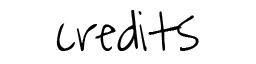
<style>
.page{position:relative;width:256px;height:64px;background:#ffffff}
.page>*{position:absolute;margin:0}
.t1{font:60px "WaitingfortheSunrise";color:#000000}
</style>
<div class="page">
<p class="t1" style="left:56px;top:10px;width:143px;height:41px">credits</p>
</div>
